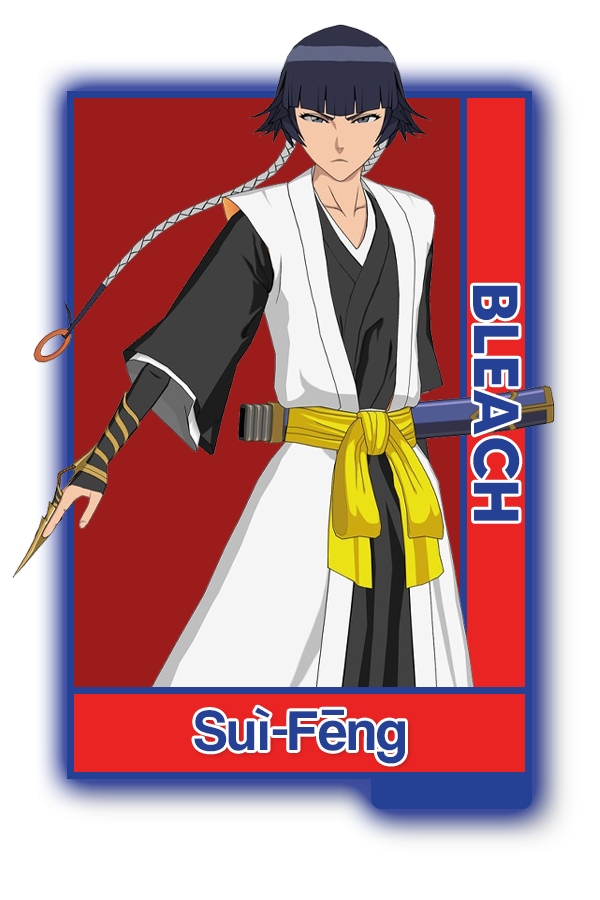
<style>
.page{position:relative;width:600px;height:900px;background:#ffffff}
.page>*{position:absolute;margin:0}
.t1{font:63.6px "MADETOMMY-Bold";color:#254195}
.t2{font:58.2px "CoolveticaRg-Regular";color:#254195}
</style>
<div class="page">
<p class="t1" style="left:473px;top:285px;width:47px;height:236px;rotate:90deg">BLEACH</p>
<p class="t2" style="left:194px;top:707px;width:211px;height:57px">Suì-Fēng</p>
</div>
